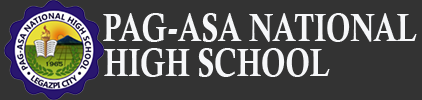
<style>
.page{position:relative;width:422px;height:100px;background:#333333}
.page>*{position:absolute;margin:0}
.t1{font:39.2px "CalisMTBol";color:#f6f7f9;scale:0.77 1}
</style>
<div class="page">
<p class="t1" style="left:103px;top:13px;width:314px;height:29px">PAG-ASA NATIONAL</p>
<p class="t1" style="left:104px;top:48px;width:226px;height:29px">HIGH SCHOOL</p>
</div>
